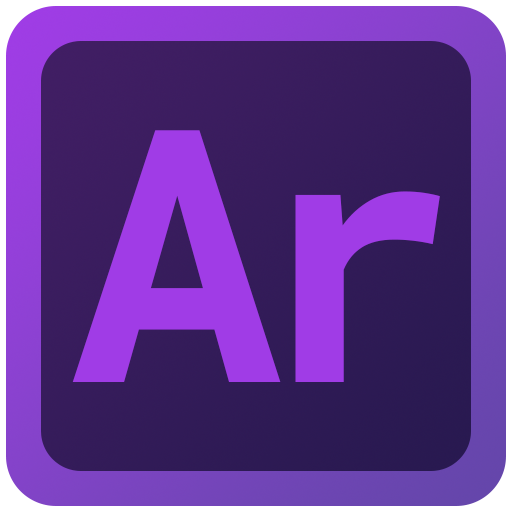
<style>
.page{position:relative;width:512px;height:512px}
.page>*{position:absolute;margin:0}
.t1{font:354.2px "RobotoMono-Bold";letter-spacing:-0.1em;color:#a03ce6}
</style>
<div class="page">
<p class="t1" style="left:72px;top:130px;width:368px;height:252px">Ar</p>
</div>
